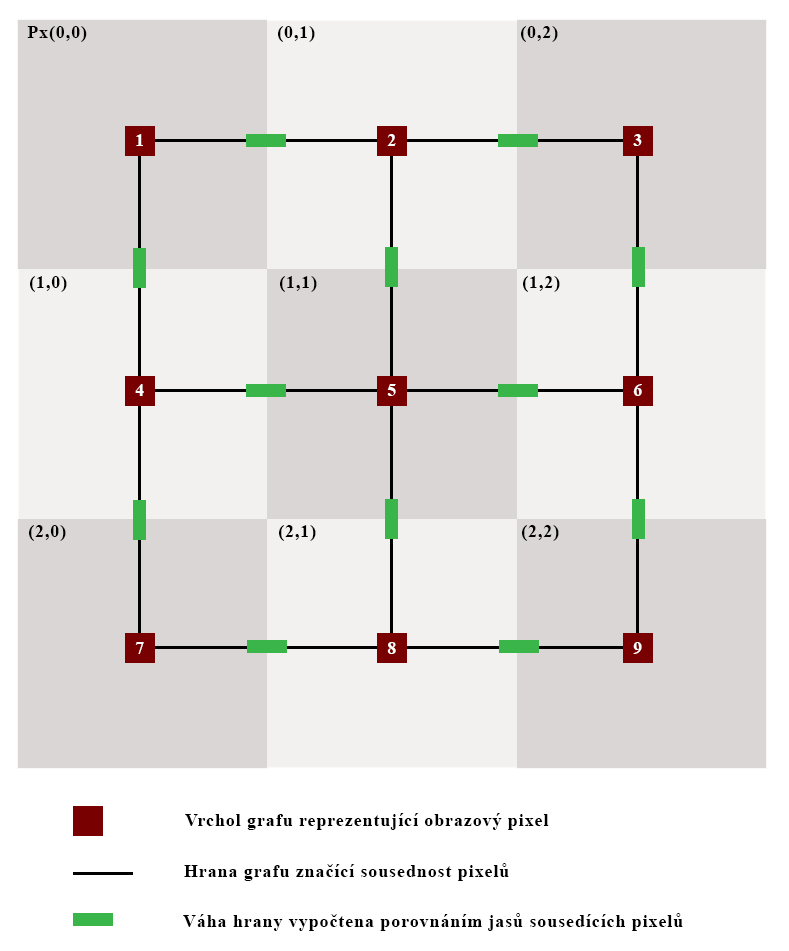
<style>
.page{position:relative;width:789px;height:951px;background:#dbd6d6}
.page>*{position:absolute;margin:0}
.t1{font:18px "TimesNewRomanPS-BoldMT";letter-spacing:0.05em;color:#000000}
.t2{font:18px "TimesNewRomanPS-BoldMT";letter-spacing:0.05em;color:#ffffff}
</style>
<div class="page">
<p class="t1" style="left:27px;top:26px;width:60px;height:16px">Px(0,0)</p>
<p class="t1" style="left:278px;top:26px;width:37px;height:16px">(0,1)</p>
<p class="t1" style="left:521px;top:26px;width:37px;height:16px">(0,2)</p>
<p class="t2" style="left:136px;top:134px;width:7px;height:12px">1</p>
<p class="t2" style="left:387px;top:134px;width:9px;height:12px">2</p>
<p class="t2" style="left:633px;top:134px;width:9px;height:12px">3</p>
<p class="t1" style="left:30px;top:276px;width:37px;height:16px">(1,0)</p>
<p class="t1" style="left:280px;top:276px;width:37px;height:16px">(1,1)</p>
<p class="t1" style="left:523px;top:276px;width:37px;height:16px">(1,2)</p>
<p class="t2" style="left:135px;top:384px;width:9px;height:12px">4</p>
<p class="t2" style="left:387px;top:384px;width:9px;height:12px">5</p>
<p class="t2" style="left:633px;top:384px;width:9px;height:12px">6</p>
<p class="t1" style="left:29px;top:525px;width:37px;height:16px">(2,0)</p>
<p class="t1" style="left:279px;top:525px;width:37px;height:16px">(2,1)</p>
<p class="t1" style="left:522px;top:525px;width:37px;height:16px">(2,2)</p>
<p class="t2" style="left:135px;top:642px;width:9px;height:12px">7</p>
<p class="t2" style="left:387px;top:642px;width:9px;height:12px">8</p>
<p class="t2" style="left:633px;top:642px;width:9px;height:12px">9</p>
<p class="t1" style="left:185px;top:813px;width:364px;height:17px">Vrchol grafu reprezentující obrazový pixel</p>
<p class="t1" style="left:184px;top:863px;width:325px;height:18px">Hrana grafu značící sousednost pixelů</p>
<p class="t1" style="left:183px;top:913px;width:500px;height:18px">Váha hrany vypočtena porovnáním jasů sousedících pixelů</p>
</div>
